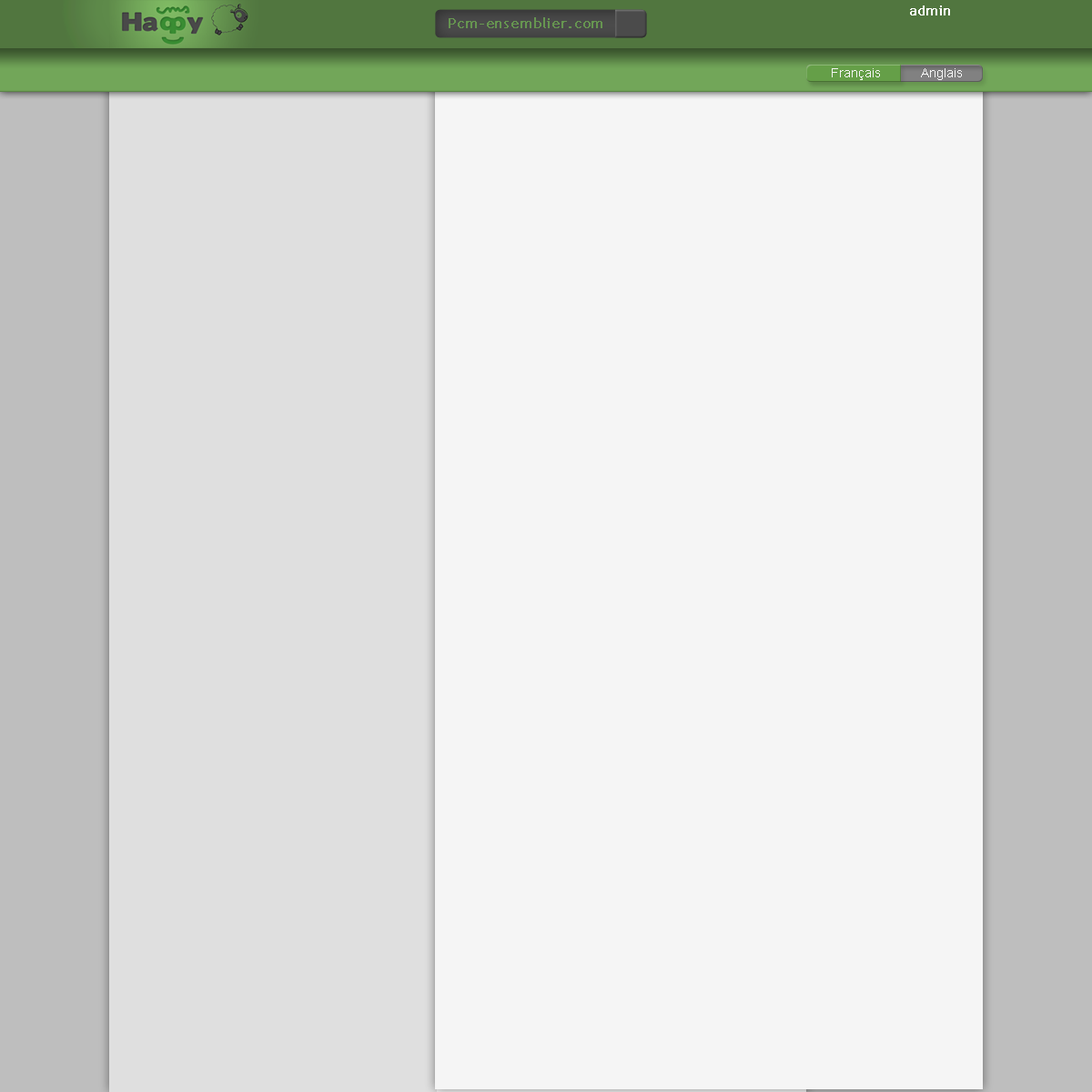
<style>
.page{position:relative;width:1092px;height:1092px;background:#f5f5f5}
.page>*{position:absolute;margin:0}
.t1{font:13.3px "TrebuchetMS";color:#ffffff;font-weight:bold}
.t2{font:14.6px "TrebuchetMS";color:#669550;font-weight:bold}
.t3{font:12.7px "ArialMT";color:#f5f5f5}
</style>
<div class="page">
<p class="t1" style="left:910px;top:5px;width:40px;height:10px">admin</p>
<p class="t2" style="left:449px;top:17px;width:153px;height:11px">Pcm-ensemblier.com</p>
<p class="t3" style="left:832px;top:68px;width:48px;height:12px">Français</p>
<p class="t3" style="left:921px;top:68px;width:41px;height:12px">Anglais</p>
</div>
